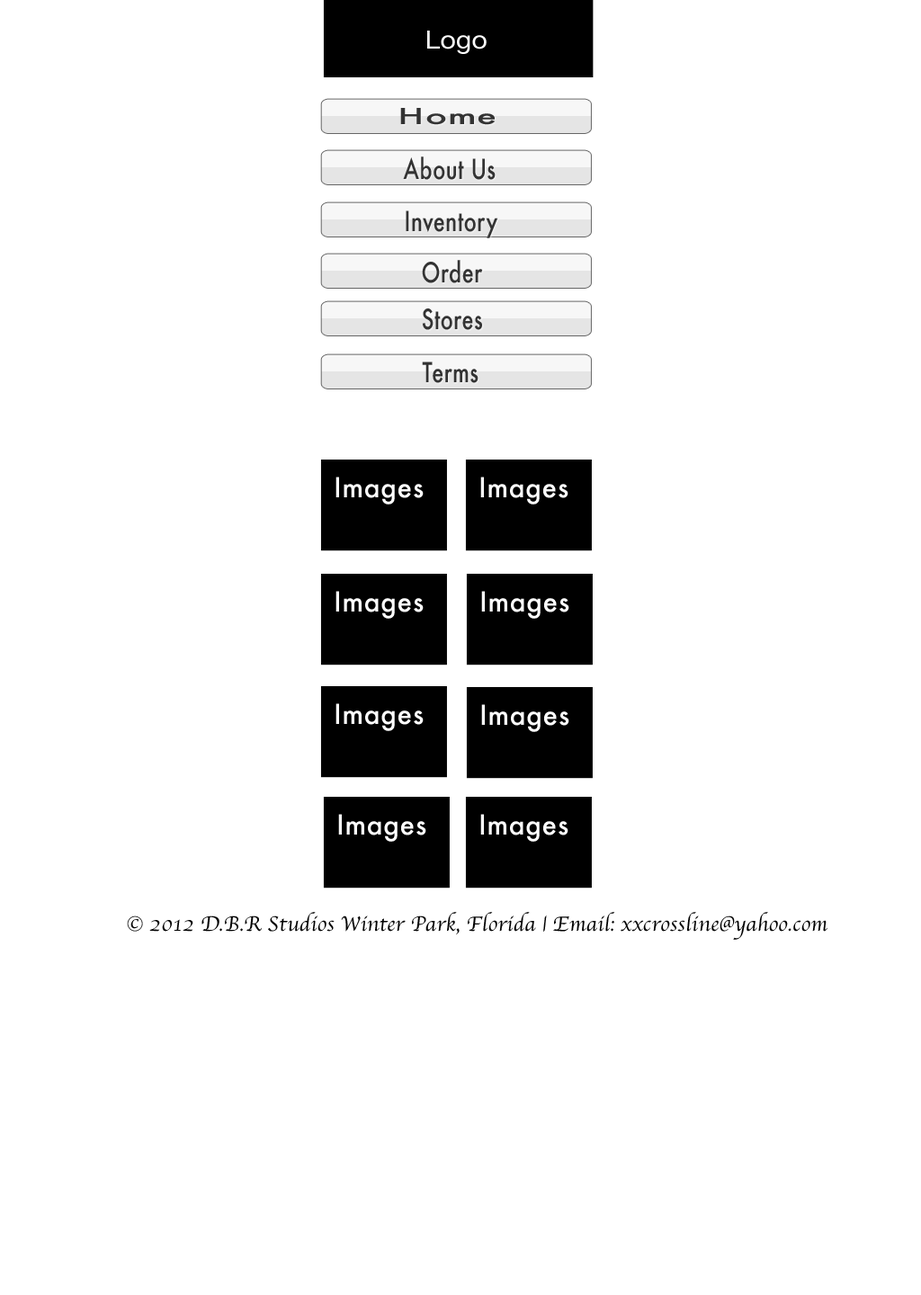
<style>
.page{position:relative;width:921px;height:1295px;background:#ffffff}
.page>*{position:absolute;margin:0}
.t1{font:25.2px "HelveticaNeue";letter-spacing:0.01em;color:#ffffff;scale:1.07 1}
.t2{font:21.6px "Futura-Medium";letter-spacing:0.02em;color:#333333;scale:1.67 1}
.t3{font:27px "Futura-Medium";letter-spacing:0.02em;color:#333333;scale:0.78 1}
.t4{font:27px "Futura-Medium";letter-spacing:0.02em;color:#ffffff}
.t5{font:21.6px "Apple-Chancery";letter-spacing:0.01em;color:#000000}
</style>
<div class="page">
<p class="t1" style="left:427px;top:31px;width:60px;height:23px">Logo</p>
<p class="t2" style="left:400px;top:108px;width:95px;height:17px">Home</p>
<p class="t3" style="left:403px;top:156px;width:92px;height:24px">About Us</p>
<p class="t3" style="left:406px;top:210px;width:92px;height:28px">Inventory</p>
<p class="t3" style="left:422px;top:260px;width:61px;height:23px">Order</p>
<p class="t3" style="left:422px;top:308px;width:60px;height:22px">Stores</p>
<p class="t3" style="left:422px;top:362px;width:56px;height:21px">Terms</p>
<p class="t4" style="left:335px;top:477px;width:89px;height:27px">Images</p>
<p class="t4" style="left:480px;top:477px;width:88px;height:27px">Images</p>
<p class="t4" style="left:335px;top:591px;width:89px;height:28px">Images</p>
<p class="t4" style="left:481px;top:591px;width:88px;height:28px">Images</p>
<p class="t4" style="left:335px;top:703px;width:89px;height:28px">Images</p>
<p class="t4" style="left:481px;top:704px;width:88px;height:28px">Images</p>
<p class="t4" style="left:338px;top:814px;width:88px;height:28px">Images</p>
<p class="t4" style="left:480px;top:814px;width:88px;height:28px">Images</p>
<p class="t5" style="left:127px;top:912px;width:700px;height:28px">© 2012 D.B.R Studios Winter Park, Florida | Email: xxcrossline@yahoo.com</p>
</div>
